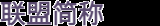
<style>
.page{position:relative;width:160px;height:26px;background:#000000}
.page>*{position:absolute;margin:0}
.t1{font:26px "WebPSD-18463539-0-Regular";color:#59496e;font-weight:bold}
</style>
<div class="page">
<p class="t1" style="left:0px;top:0px;width:160px;height:26px">联盟简称</p>
</div>
